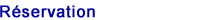
<style>
.page{position:relative;width:205px;height:20px;background:#ffffff}
.page>*{position:absolute;margin:0}
.t1{font:16px "ArialMT";letter-spacing:0.04em;color:#000099;font-weight:bold}
</style>
<div class="page">
<p class="t1" style="left:0px;top:5px;width:95px;height:13px">Réservation</p>
</div>
